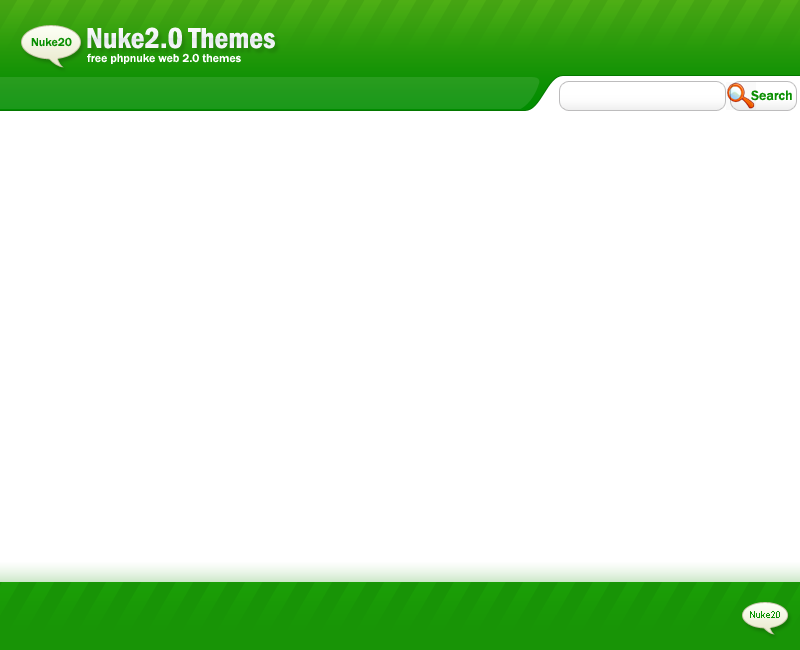
<style>
.page{position:relative;width:800px;height:650px;background:#ffffff}
.page>*{position:absolute;margin:0}
.t1{font:30px "FranklinGotT-DemCon";color:#ffffff}
.t2{font:12px "FranklinGothic-Medium";color:#098f02}
.t3{font:12px "FranklinGothic-Medium";color:#ffffff}
.t4{font:14px "FranklinGothic-Medium";color:#0b9003}
.t5{font:9px "ArialMT";color:#098f02}
</style>
<div class="page">
<p class="t1" style="left:87px;top:27px;width:188px;height:22px">Nuke2.0 Themes</p>
<p class="t2" style="left:31px;top:37px;width:41px;height:10px">Nuke20</p>
<p class="t3" style="left:87px;top:53px;width:154px;height:11px">free phpnuke web 2.0 themes</p>
<p class="t4" style="left:751px;top:90px;width:41px;height:11px">Search</p>
<p class="t5" style="left:750px;top:611px;width:30px;height:7px">Nuke20</p>
</div>
